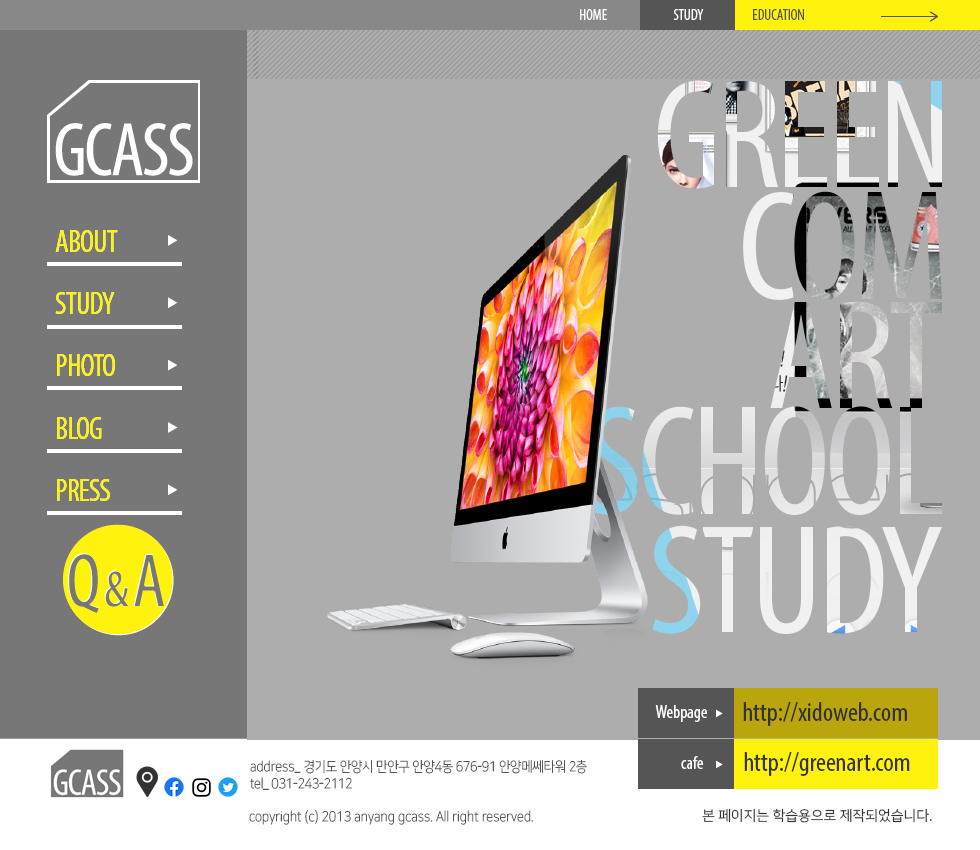
<style>
.page{position:relative;width:980px;height:850px;background:#adadad}
.page>*{position:absolute;margin:0}
.t1{font:15px "MyriadPro-Cond";color:#ffffff}
.t2{font:15px "MyriadPro-Cond";color:#555555}
.t3{font:31.5px "MyriadPro-Cond";letter-spacing:-0.03em;color:#fff30d}
.t4{font:27px "MyriadPro-Cond";color:#333333}
.t5{font:18px "MyriadPro-Cond";color:#ffffff}
.t6{font:14px "NanumSquareL";letter-spacing:-0.025em;color:#555555;scale:0.9 1}
.t7{font:14px "NanumSquareL";color:#555555;scale:0.9 1}
.t8{font:14px "NanumSquareR";color:#333333}
.t9{font:14px "NanumSquare_acL";color:#555555;scale:0.9 1}
</style>
<div class="page">
<p class="t1" style="left:580px;top:9px;width:27px;height:11px">HOME</p>
<p class="t1" style="left:673px;top:9px;width:31px;height:11px">STUDY</p>
<p class="t2" style="left:753px;top:9px;width:51px;height:11px">EDUCATION</p>
<p class="t3" style="left:55px;top:230px;width:63px;height:22px">ABOUT</p>
<p class="t3" style="left:55px;top:230px;width:63px;height:22px">ABOUT</p>
<p class="t3" style="left:55px;top:292px;width:60px;height:22px">STUDY</p>
<p class="t3" style="left:55px;top:292px;width:60px;height:22px">STUDY</p>
<p class="t3" style="left:57px;top:354px;width:58px;height:22px">PHOTO</p>
<p class="t3" style="left:57px;top:354px;width:58px;height:22px">PHOTO</p>
<p class="t3" style="left:57px;top:417px;width:45px;height:22px">BLOG</p>
<p class="t3" style="left:57px;top:417px;width:45px;height:22px">BLOG</p>
<p class="t3" style="left:57px;top:479px;width:53px;height:22px">PRESS</p>
<p class="t3" style="left:57px;top:479px;width:53px;height:22px">PRESS</p>
<p class="t4" style="left:743px;top:702px;width:164px;height:24px">http://xidoweb.com</p>
<p class="t5" style="left:655px;top:705px;width:52px;height:17px">Webpage</p>
<p class="t6" style="left:250px;top:759px;width:337px;height:31px"><span class="t7">address_ </span>경기도 안양시 만안구 안양4동 676-91 안양메쎄타워 2층<br>tel_ 031-243-2112</p>
<p class="t5" style="left:681px;top:756px;width:22px;height:13px">cafe</p>
<p class="t4" style="left:744px;top:752px;width:166px;height:24px">http://greenart.com</p>
<p class="t8" style="left:702px;top:808px;width:230px;height:15px">본 페이지는 학습용으로 제작되었습니다.</p>
<p class="t9" style="left:249px;top:810px;width:284px;height:15px">copyright (c) 2013 anyang gcass. All right reserved.</p>
</div>
